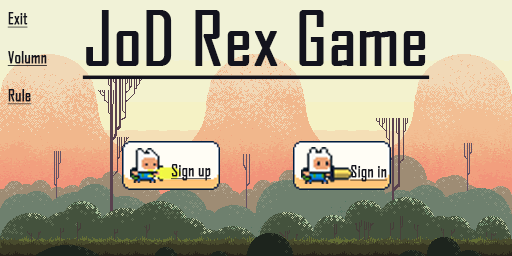
<style>
.page{position:relative;width:512px;height:256px}
.page>*{position:absolute;margin:0}
.t1{font:16px "AgencyFB-Reg";color:#13131d;font-weight:bold;text-decoration:underline}
.t2{font:72px "AgencyFB-Reg";color:#13131d;font-weight:bold;text-decoration:underline}
</style>
<div class="page">
<p class="t1" style="left:7px;top:12px;width:40px;height:93px">Exit<br><br>Volumn<br><br>Rule</p>
<p class="t2" style="left:82px;top:10px;width:348px;height:70px">JoD Rex Game</p>
<p class="t1" style="left:171px;top:164px;width:40px;height:17px">Sign up</p>
<p class="t1" style="left:350px;top:165px;width:37px;height:17px">Sign in</p>
</div>
